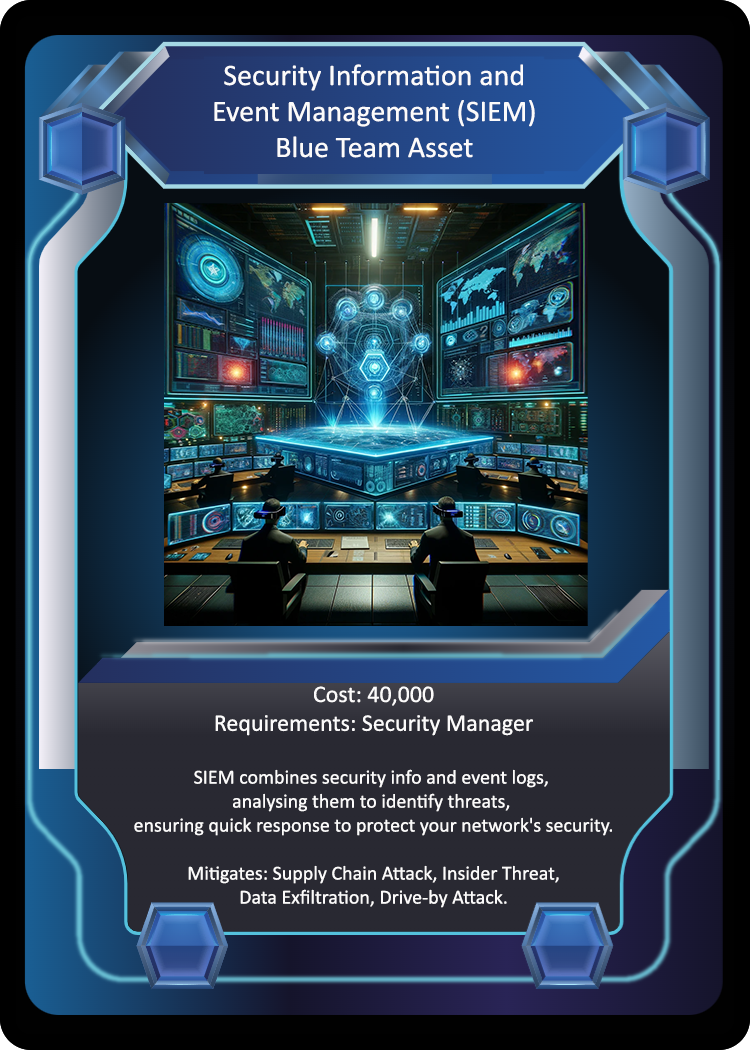
<style>
.page{position:relative;width:750px;height:1050px}
.page>*{position:absolute;margin:0}
.t1{font:30px "Calibri";color:#fcfbfb}
.t2{font:20px "Calibri";color:#fcfbfb}
.t3{font:24px "Calibri";color:#fcfbfb}
</style>
<div class="page">
<p class="t1" style="left:214px;top:64px;width:321px;height:94px;text-align:center">Security Information and<br>Event Management (SIEM)<br>Blue Team Asset</p>
<p class="t2" style="left:134px;top:686px;width:478px;height:222px;text-align:center"><span class="t3">Cost: 40,000<br>Requirements: Security Manager<br><br></span>SIEM combines security info and event logs, <br>analysing them to identify threats, <br>ensuring quick response to protect your network's security.<br><br>Mitigates: Supply Chain Attack, Insider Threat,<br>Data Exfiltration, Drive-by Attack.</p>
</div>
